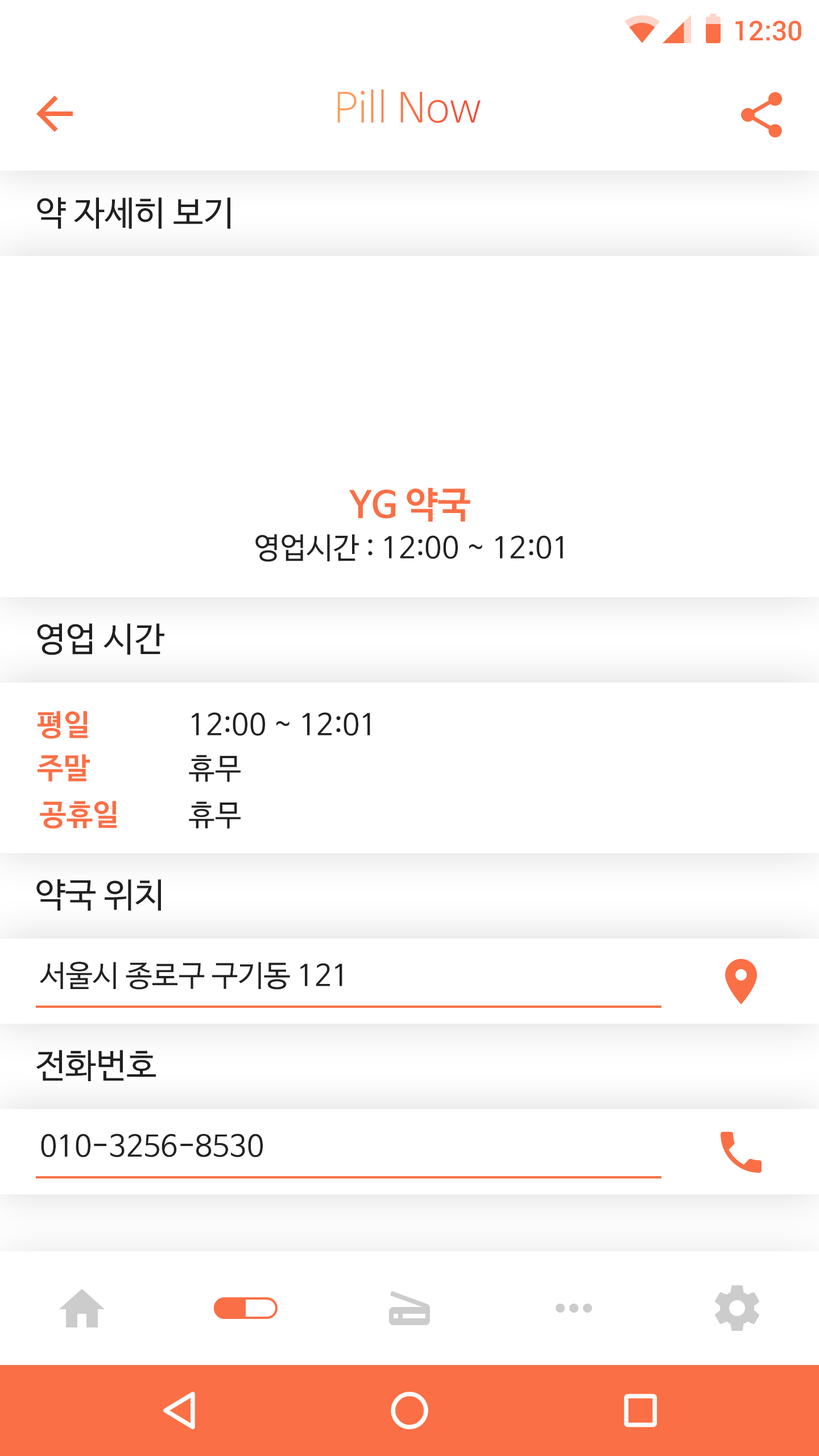
<style>
.page{position:relative;width:819px;height:1456px;background:#ffffff}
.page>*{position:absolute;margin:0}
.t1{font:27.3px "Roboto-Medium";color:#fa6f45}
.t2{font:40.9px "NanumBarunGothicLight"}
.t3{font:34.1px "NanumBarunGothic";color:#202020}
.t4{font:36.4px "NanumBarunGothicBold";color:#fa6f45}
.t5{font:29.6px "NanumBarunGothic";color:#222222}
.t6{font:29.6px "NanumBarunGothicBold";color:#fa6f45}
</style>
<div class="page">
<p class="t1" style="left:735px;top:20px;width:66px;height:21px">12:30</p>
<p class="t2" style="left:337px;top:89px;width:144px;height:34px">Pill Now</p>
<p class="t3" style="left:37px;top:197px;width:193px;height:32px">약 자세히 보기</p>
<p class="t4" style="left:349px;top:487px;width:121px;height:35px">YG 약국</p>
<p class="t5" style="left:255px;top:534px;width:308px;height:28px">영업시간 : 12:00 ~ 12:01</p>
<p class="t3" style="left:37px;top:623px;width:127px;height:32px">영업 시간</p>
<p class="t6" style="left:38px;top:711px;width:50px;height:28px">평일</p>
<p class="t5" style="left:192px;top:712px;width:178px;height:24px">12:00 ~ 12:01</p>
<p class="t6" style="left:38px;top:754px;width:52px;height:27px">주말</p>
<p class="t5" style="left:189px;top:755px;width:52px;height:27px">휴무</p>
<p class="t6" style="left:40px;top:801px;width:77px;height:28px">공휴일</p>
<p class="t5" style="left:189px;top:801px;width:52px;height:28px">휴무</p>
<p class="t3" style="left:36px;top:879px;width:125px;height:32px">약국 위치</p>
<p class="t5" style="left:40px;top:962px;width:302px;height:28px">서울시 종로구 구기동 121</p>
<p class="t3" style="left:36px;top:1050px;width:120px;height:31px">전화번호</p>
<p class="t5" style="left:41px;top:1134px;width:222px;height:23px">010-3256-8530</p>
</div>
